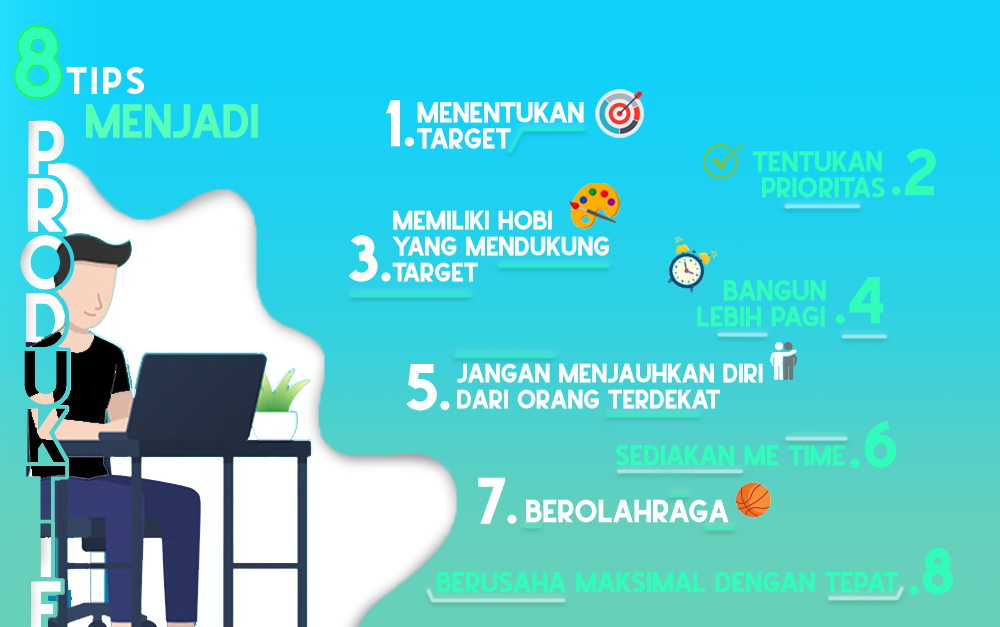
<style>
.page{position:relative;width:1000px;height:627px}
.page>*{position:absolute;margin:0}
.t1{font:97.8px "School-Times";letter-spacing:-0.2em;color:#30fdb9}
.t2{font:36px "School-Times";letter-spacing:0.1em;color:#ffffff}
.t3{font:61.4px "School-Times";color:#ffffff}
.t4{font:27px/26px "School-Times";color:#ffffff}
.t5{font:44.7px "School-Times";color:#57ffb8}
.t6{font:62px "School-Times";color:#30fdb9}
.t7{font:27px/26px "School-Times";color:#30fdba}
.t8{font:25px/26px "School-Times";color:#ffffff}
.t9{font:27px "School-Times";color:#30fdba}
.t10{font:30px "School-Times";color:#ffffff}
</style>
<div class="page">
<p class="t1" style="left:14px;top:25px;width:48px;height:74px">8</p>
<p class="t2" style="left:66px;top:67px;width:78px;height:27px">TIPS</p>
<p class="t3" style="left:386px;top:100px;width:28px;height:47px">1.</p>
<p class="t4" style="left:417px;top:102px;width:167px;height:47px">MENENTUKAN <br>TARGET</p>
<p class="t5" style="left:86px;top:104px;width:172px;height:34px">menjadi</p>
<p class="t6" style="left:891px;top:148px;width:45px;height:48px">.2</p>
<p class="t7" style="left:752px;top:151px;width:133px;height:47px">Tentukan <br>  Prioritas</p>
<p class="t8" style="left:392px;top:210px;width:217px;height:72px">Memiliki Hobi <br>yang Mendukung<br>Target</p>
<p class="t3" style="left:348px;top:235px;width:43px;height:47px">3.</p>
<p class="t7" style="left:697px;top:280px;width:129px;height:47px">Bangun <br>Lebih Pagi</p>
<p class="t6" style="left:835px;top:277px;width:49px;height:47px">.4</p>
<p class="t3" style="left:406px;top:364px;width:44px;height:47px">5.</p>
<p class="t8" style="left:457px;top:363px;width:306px;height:46px">Jangan Menjauhkan Diri <br>dari Orang Terdekat</p>
<p class="t6" style="left:850px;top:420px;width:47px;height:48px">.6</p>
<p class="t9" style="left:616px;top:445px;width:229px;height:21px">Sediakan Me Time</p>
<p class="t3" style="left:478px;top:477px;width:39px;height:47px">7.</p>
<p class="t10" style="left:526px;top:499px;width:203px;height:24px">Berolahraga</p>
<p class="t6" style="left:909px;top:548px;width:44px;height:47px">.8</p>
<p class="t9" style="left:437px;top:572px;width:462px;height:21px">Berusaha Maksimal dengan Tepat</p>
</div>
